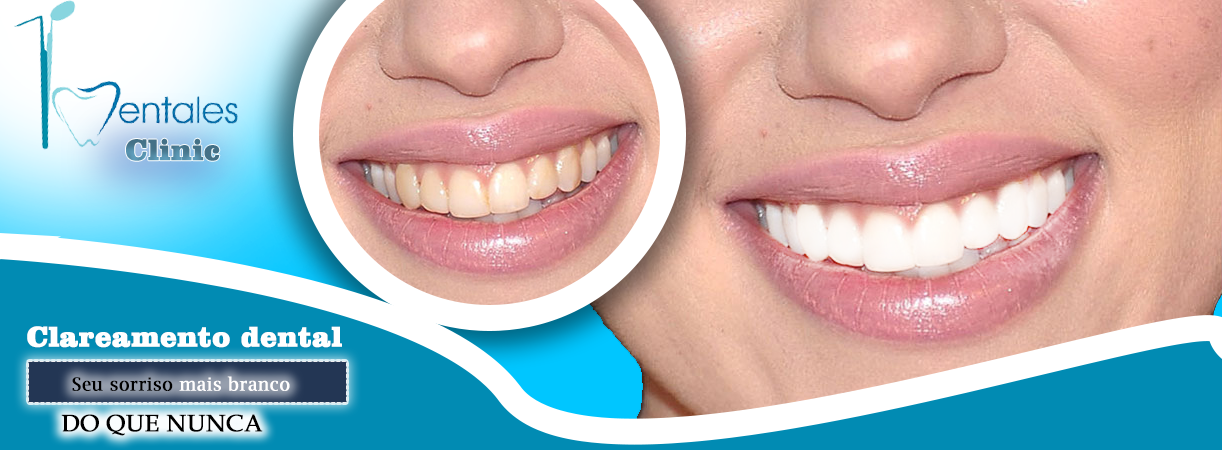
<style>
.page{position:relative;width:1222px;height:450px}
.page>*{position:absolute;margin:0}
.t1{font:30px "ClarendonBT-Black";font-weight:bold}
.t2{font:29.2px "ClarendonBT-Black";color:#ffffff;font-weight:bold}
.t3{font:24px "BookAntiqua";color:#000000;font-weight:bold}
</style>
<div class="page">
<p class="t1" style="left:126px;top:138px;width:94px;height:23px">Clinic</p>
<p class="t2" style="left:27px;top:326px;width:315px;height:22px">Clareamento dental</p>
<p class="t3" style="left:61px;top:414px;width:202px;height:22px">DO QUE NUNCA</p>
</div>
